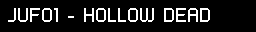
<style>
.page{position:relative;width:256px;height:32px;background:#000000}
.page>*{position:absolute;margin:0}
.t1{font:16px "PFTempestaSeven";color:#ffffff}
</style>
<div class="page">
<p class="t1" style="left:8px;top:8px;width:202px;height:14px">JUF01 - HOLLOW DEAD</p>
</div>
